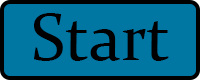
<style>
.page{position:relative;width:200px;height:80px;background:#0076a3}
.page>*{position:absolute;margin:0}
.t1{font:66.7px "Constantia";color:#000000}
</style>
<div class="page">
<p class="t1" style="left:34px;top:13px;width:135px;height:48px">Start</p>
</div>
